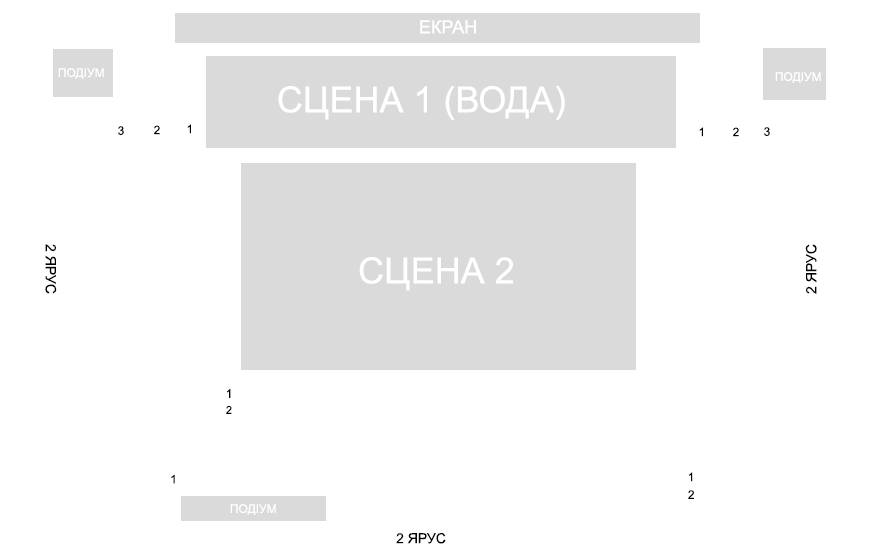
<style>
.page{position:relative;width:889px;height:556px;background:#ffffff}
.page>*{position:absolute;margin:0}
.t1{font:18px "ArialMT";color:#ffffff}
.t2{font:12px "ArialMT";color:#ffffff}
.t3{font:36px "ArialMT";color:#ffffff}
.t4{font:12px "ArialMT";color:#030303}
.t5{font:14.4px "ArialMT";color:#000000}
.t6{font:11px "ArialMT";color:#030303}
.t7{font:14px "ArialMT";color:#000000}
</style>
<div class="page">
<p class="t1" style="left:420px;top:20px;width:56px;height:14px">ЕКРАН</p>
<p class="t2" style="left:58px;top:68px;width:46px;height:11px">ПОДІУМ</p>
<p class="t2" style="left:775px;top:72px;width:46px;height:11px">ПОДІУМ</p>
<p class="t3" style="left:278px;top:86px;width:287px;height:34px">СЦЕНА 1 (ВОДА)</p>
<p class="t4" style="left:118px;top:126px;width:6px;height:10px">3</p>
<p class="t4" style="left:154px;top:125px;width:6px;height:10px">2</p>
<p class="t4" style="left:187px;top:124px;width:4px;height:10px">1</p>
<p class="t4" style="left:699px;top:127px;width:4px;height:10px">1</p>
<p class="t4" style="left:733px;top:127px;width:6px;height:10px">2</p>
<p class="t4" style="left:764px;top:127px;width:6px;height:10px">3</p>
<p class="t5" style="left:45px;top:244px;width:12px;height:50px;rotate:90deg">2 ЯРУС</p>
<p class="t5" style="left:805px;top:244px;width:12px;height:50px;rotate:-90deg">2 ЯРУС</p>
<p class="t3" style="left:359px;top:257px;width:154px;height:34px">СЦЕНА 2</p>
<p class="t4" style="left:227px;top:389px;width:4px;height:9px">1</p>
<p class="t6" style="left:226px;top:405px;width:6px;height:9px">2</p>
<p class="t4" style="left:689px;top:472px;width:4px;height:10px">1</p>
<p class="t4" style="left:171px;top:474px;width:4px;height:10px">1</p>
<p class="t4" style="left:688px;top:490px;width:6px;height:9px">2</p>
<p class="t2" style="left:230px;top:504px;width:46px;height:11px">ПОДІУМ</p>
<p class="t7" style="left:396px;top:533px;width:50px;height:11px">2 ЯРУС</p>
</div>
